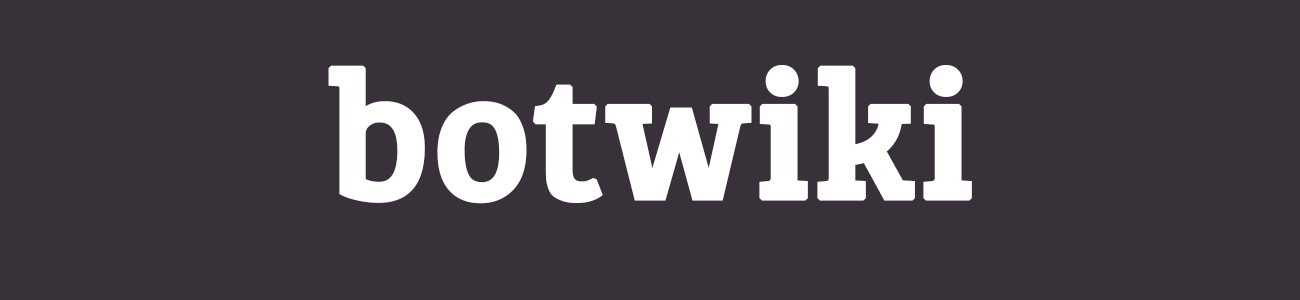
<style>
.page{position:relative;width:1300px;height:300px;background:#38313a}
.page>*{position:absolute;margin:0}
.t1{font:182px "BreeSerif-Regular";color:#ffffff;font-weight:bold}
</style>
<div class="page">
<p class="t1" style="left:328px;top:65px;width:644px;height:139px">botwiki</p>
</div>
